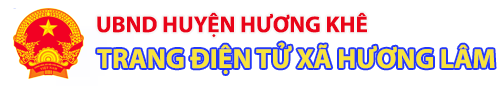
<style>
.page{position:relative;width:504px;height:86px;background:#ffffff}
.page>*{position:absolute;margin:0}
.t1{font:23px "MyriadPro-Bold";color:#e90419}
.t2{font:27.7px "MyriadPro-Bold";color:#f7e33b}
</style>
<div class="page">
<p class="t1" style="left:97px;top:12px;width:270px;height:26px">UBND HUYỆN HƯƠNG KHÊ</p>
<p class="t2" style="left:97px;top:42px;width:398px;height:32px">TRANG ĐIỆN TỬ XÃ HƯƠNG LÂM</p>
</div>
